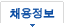
<style>
.page{position:relative;width:64px;height:27px;background:#ffffff}
.page>*{position:absolute;margin:0}
.t1{font:11px "ÈÞ¸Õ°íµñ";color:#0c4da2;font-weight:bold}
</style>
<div class="page">
<p class="t1" style="left:10px;top:8px;width:45px;height:11px">채용정보</p>
</div>
